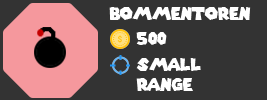
<style>
.page{position:relative;width:267px;height:100px;background:#333333}
.page>*{position:absolute;margin:0}
.t1{font:16.7px "SuperMarioGalaxy";color:#ffffff}
</style>
<div class="page">
<p class="t1" style="left:109px;top:7px;width:142px;height:13px">Bommentoren</p>
<p class="t1" style="left:136px;top:32px;width:31px;height:13px">500</p>
<p class="t1" style="left:136px;top:58px;width:65px;height:33px">small<br>range</p>
</div>
